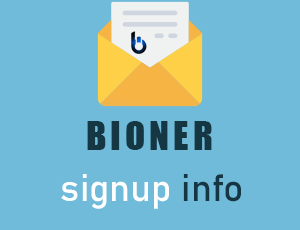
<style>
.page{position:relative;width:300px;height:230px;background:#70bbd9}
.page>*{position:absolute;margin:0}
.t1{font:37.4px "Impact";letter-spacing:0.1em;color:#153643}
.t2{font:37.4px "Bahnschrift";color:#ffffff}
.t3{font:37.4px "Bahnschrift";color:#153643}
</style>
<div class="page">
<p class="t1" style="left:87px;top:121px;width:125px;height:29px">BIONER</p>
<p class="t2" style="left:61px;top:174px;width:180px;height:35px">signup <span class="t3">info</span></p>
</div>
